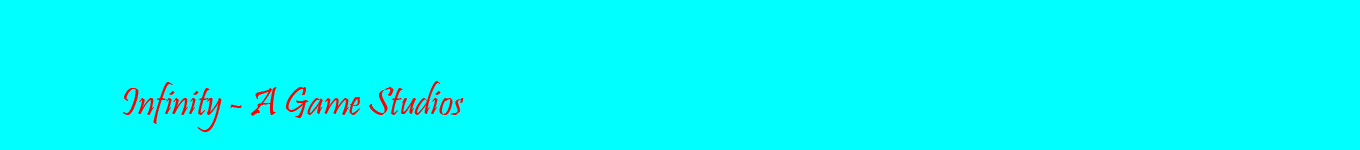
<style>
.page{position:relative;width:1360px;height:150px;background:#00ffff}
.page>*{position:absolute;margin:0}
.t1{font:40px "Pristina-Regular";color:#ff0000}
</style>
<div class="page">
<p class="t1" style="left:123px;top:81px;width:341px;height:51px">Infinity - A Game Studios</p>
</div>
